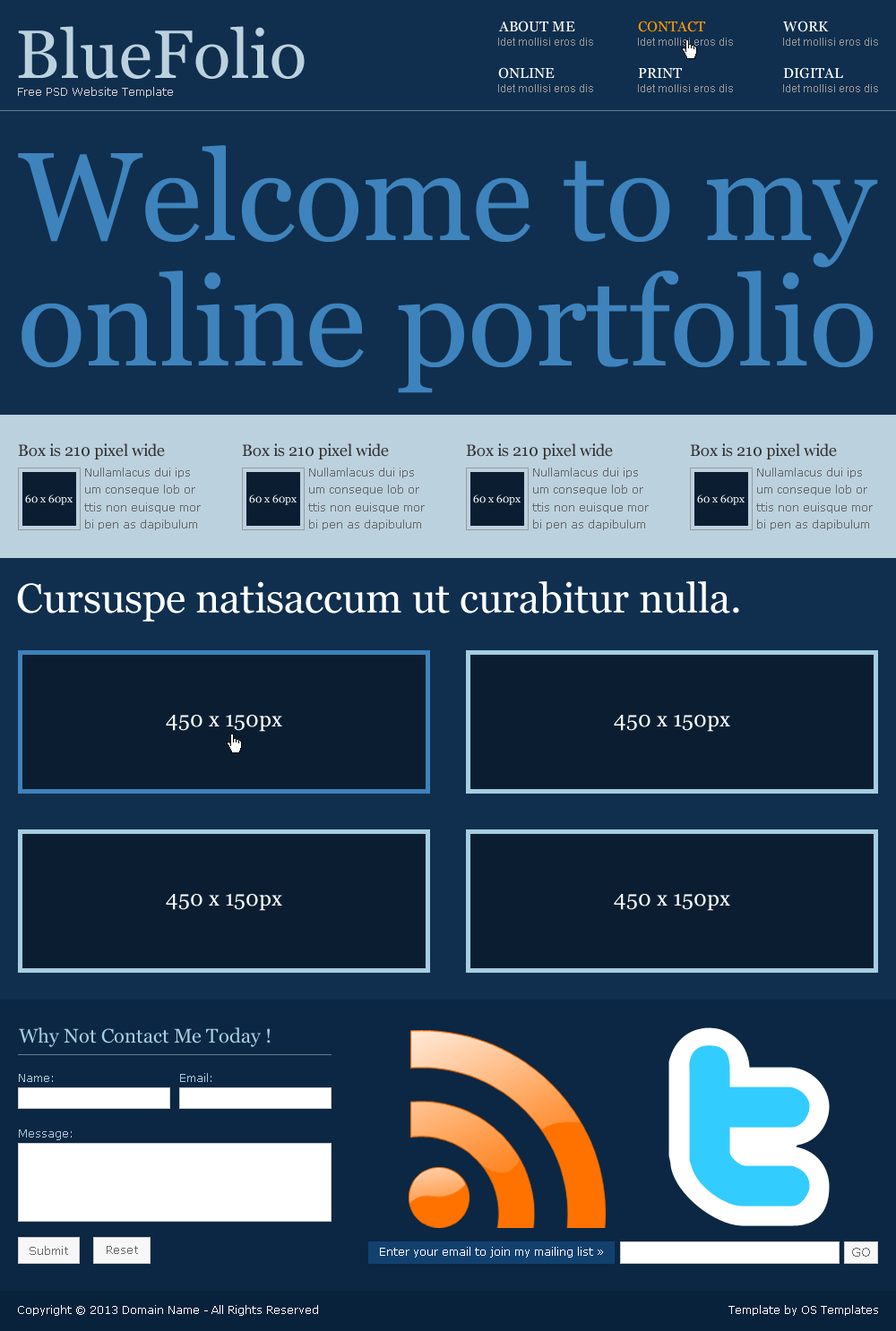
<style>
.page{position:relative;width:896px;height:1331px;background:#102f4e}
.page>*{position:absolute;margin:0}
.t1{font:68.1px "Georgia";color:#bcd1de}
.t2{font:14.3px "Georgia";color:#ffffff}
.t3{font:14.3px "Georgia";color:#ff9900}
.t4{font:10.7px "ArialMT";color:#999999}
.t5{font:10.7px "Verdana";color:#d2d2d2}
.t6{font:125.4px/125.4px "Georgia";letter-spacing:-0.001em;color:#3e83bc}
.t7{font:16.1px "Georgia";color:#333333}
.t8{font:10.7px/17.2px "Verdana";color:#666666}
.t9{font:10.7px "Georgia";color:#ffffff}
.t10{font:41.2px "Georgia";color:#ffffff}
.t11{font:21.5px "Georgia";color:#ffffff}
.t12{font:19.7px "Georgia";color:#a5cee0}
.t13{font:11.6px "Verdana";color:#a5cee0}
.t14{font:11.6px "Verdana";color:#666666}
.t15{font:10.7px "Verdana";color:#ffffff}
.t16{font:12.5px "Verdana";color:#666666}
</style>
<div class="page">
<p class="t1" style="left:18px;top:26px;width:287px;height:53px">BlueFolio</p>
<p class="t2" style="left:498px;top:21px;width:77px;height:11px">ABOUT ME</p>
<p class="t3" style="left:638px;top:21px;width:67px;height:11px">CONTACT</p>
<p class="t2" style="left:783px;top:21px;width:46px;height:11px">WORK</p>
<p class="t4" style="left:498px;top:38px;width:95px;height:8px">Idet mollisi eros dis</p>
<p class="t4" style="left:638px;top:38px;width:95px;height:8px">Idet mollisi eros dis</p>
<p class="t4" style="left:783px;top:38px;width:95px;height:8px">Idet mollisi eros dis</p>
<p class="t2" style="left:498px;top:67px;width:56px;height:12px">ONLINE</p>
<p class="t2" style="left:638px;top:68px;width:44px;height:10px">PRINT</p>
<p class="t2" style="left:783px;top:67px;width:60px;height:12px">DIGITAL</p>
<p class="t5" style="left:18px;top:87px;width:155px;height:11px">Free PSD Website Template</p>
<p class="t4" style="left:498px;top:84px;width:95px;height:8px">Idet mollisi eros dis</p>
<p class="t4" style="left:638px;top:84px;width:95px;height:8px">Idet mollisi eros dis</p>
<p class="t4" style="left:783px;top:84px;width:95px;height:8px">Idet mollisi eros dis</p>
<p class="t6" style="left:18px;top:145px;width:860px;height:248px;text-align:center">Welcome to my<br>online portfolio</p>
<p class="t7" style="left:18px;top:443px;width:147px;height:17px">Box is 210 pixel wide</p>
<p class="t7" style="left:242px;top:443px;width:147px;height:17px">Box is 210 pixel wide</p>
<p class="t7" style="left:466px;top:443px;width:147px;height:17px">Box is 210 pixel wide</p>
<p class="t7" style="left:690px;top:443px;width:147px;height:17px">Box is 210 pixel wide</p>
<p class="t8" style="left:84px;top:468px;width:117px;height:62px">Nullamlacus dui ips um conseque lob or ttis non euisque mor bi pen as dapibulum</p>
<p class="t8" style="left:308px;top:468px;width:117px;height:62px">Nullamlacus dui ips um conseque lob or ttis non euisque mor bi pen as dapibulum</p>
<p class="t8" style="left:532px;top:468px;width:117px;height:62px">Nullamlacus dui ips um conseque lob or ttis non euisque mor bi pen as dapibulum</p>
<p class="t8" style="left:756px;top:468px;width:117px;height:62px">Nullamlacus dui ips um conseque lob or ttis non euisque mor bi pen as dapibulum</p>
<p class="t9" style="left:25px;top:494px;width:48px;height:11px">60 x 60px</p>
<p class="t9" style="left:249px;top:494px;width:48px;height:11px">60 x 60px</p>
<p class="t9" style="left:473px;top:494px;width:47px;height:11px">60 x 60px</p>
<p class="t9" style="left:697px;top:494px;width:47px;height:11px">60 x 60px</p>
<p class="t10" style="left:17px;top:581px;width:722px;height:41px">Cursuspe natisaccum ut curabitur nulla.</p>
<p class="t11" style="left:166px;top:715px;width:116px;height:17px">450 x 150px</p>
<p class="t11" style="left:614px;top:715px;width:116px;height:17px">450 x 150px</p>
<p class="t11" style="left:166px;top:894px;width:116px;height:17px">450 x 150px</p>
<p class="t11" style="left:614px;top:894px;width:116px;height:17px">450 x 150px</p>
<p class="t12" style="left:19px;top:1027px;width:252px;height:20px">Why Not Contact Me Today !</p>
<p class="t13" style="left:180px;top:1073px;width:31px;height:9px">Email:</p>
<p class="t13" style="left:19px;top:1074px;width:34px;height:8px">Name:</p>
<p class="t13" style="left:19px;top:1130px;width:53px;height:10px">Message:</p>
<p class="t14" style="left:30px;top:1246px;width:38px;height:9px">Submit</p>
<p class="t14" style="left:107px;top:1246px;width:31px;height:8px">Reset</p>
<p class="t15" style="left:380px;top:1247px;width:223px;height:11px">Enter your email to join my mailing list »</p>
<p class="t16" style="left:852px;top:1248px;width:18px;height:9px">GO</p>
<p class="t15" style="left:18px;top:1305px;width:300px;height:11px">Copyright © 2013 Domain Name - All Rights Reserved</p>
<p class="t15" style="left:728px;top:1305px;width:150px;height:11px">Template by OS Templates</p>
</div>
